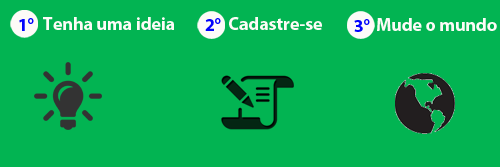
<style>
.page{position:relative;width:500px;height:167px;background:#02b452}
.page>*{position:absolute;margin:0}
.t1{font:18px "MyriadPro-Bold";color:#fdfbf7}
.t2{font:18px "MyriadPro-Bold";color:#0202fc}
</style>
<div class="page">
<p class="t1" style="left:43px;top:17px;width:131px;height:13px">Tenha uma ideia</p>
<p class="t1" style="left:229px;top:17px;width:93px;height:13px">Cadastre-se</p>
<p class="t2" style="left:19px;top:18px;width:15px;height:13px">1°</p>
<p class="t2" style="left:205px;top:18px;width:16px;height:13px">2°</p>
<p class="t2" style="left:354px;top:19px;width:16px;height:13px">3°</p>
<p class="t1" style="left:377px;top:18px;width:120px;height:13px">Mude o mundo</p>
</div>
